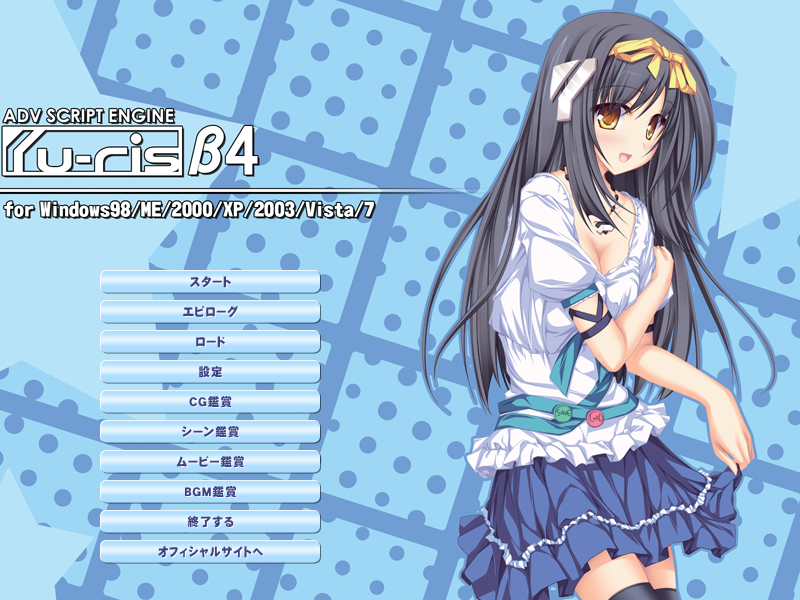
<style>
.page{position:relative;width:800px;height:600px}
.page>*{position:absolute;margin:0}
.t1{font:12px "DFGothic-EB-WING-RKSJ-H";letter-spacing:0.1em;color:#404080;scale:0.95 1}
.t2{font:12px "DFGothic-EB-WING-RKSJ-H";letter-spacing:0.1em;color:#404080;scale:0.9 1}
</style>
<div class="page">
<p class="t1" style="left:190px;top:276px;width:41px;height:12px">スタート</p>
<p class="t1" style="left:183px;top:305px;width:55px;height:13px">エピローグ</p>
<p class="t1" style="left:196px;top:336px;width:29px;height:12px">ロード</p>
<p class="t1" style="left:199px;top:366px;width:23px;height:12px">設定</p>
<p class="t1" style="left:189px;top:396px;width:43px;height:12px">ＣＧ鑑賞</p>
<p class="t1" style="left:182px;top:426px;width:57px;height:12px">シーン鑑賞</p>
<p class="t1" style="left:176px;top:456px;width:68px;height:12px">ムービー鑑賞</p>
<p class="t1" style="left:185px;top:486px;width:52px;height:12px">ＢＧＭ鑑賞</p>
<p class="t1" style="left:187px;top:516px;width:47px;height:12px">終了する</p>
<p class="t2" style="left:158px;top:546px;width:105px;height:12px">オフィシャルサイトへ</p>
</div>
